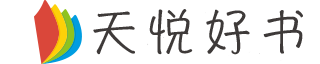
<style>
.page{position:relative;width:320px;height:64px;background:#ffffff}
.page>*{position:absolute;margin:0}
.t1{font:48px "HannotateSC-W5";letter-spacing:0.18em;color:#3e3a39}
</style>
<div class="page">
<p class="t1" style="left:93px;top:9px;width:210px;height:46px">天悦好书</p>
</div>
